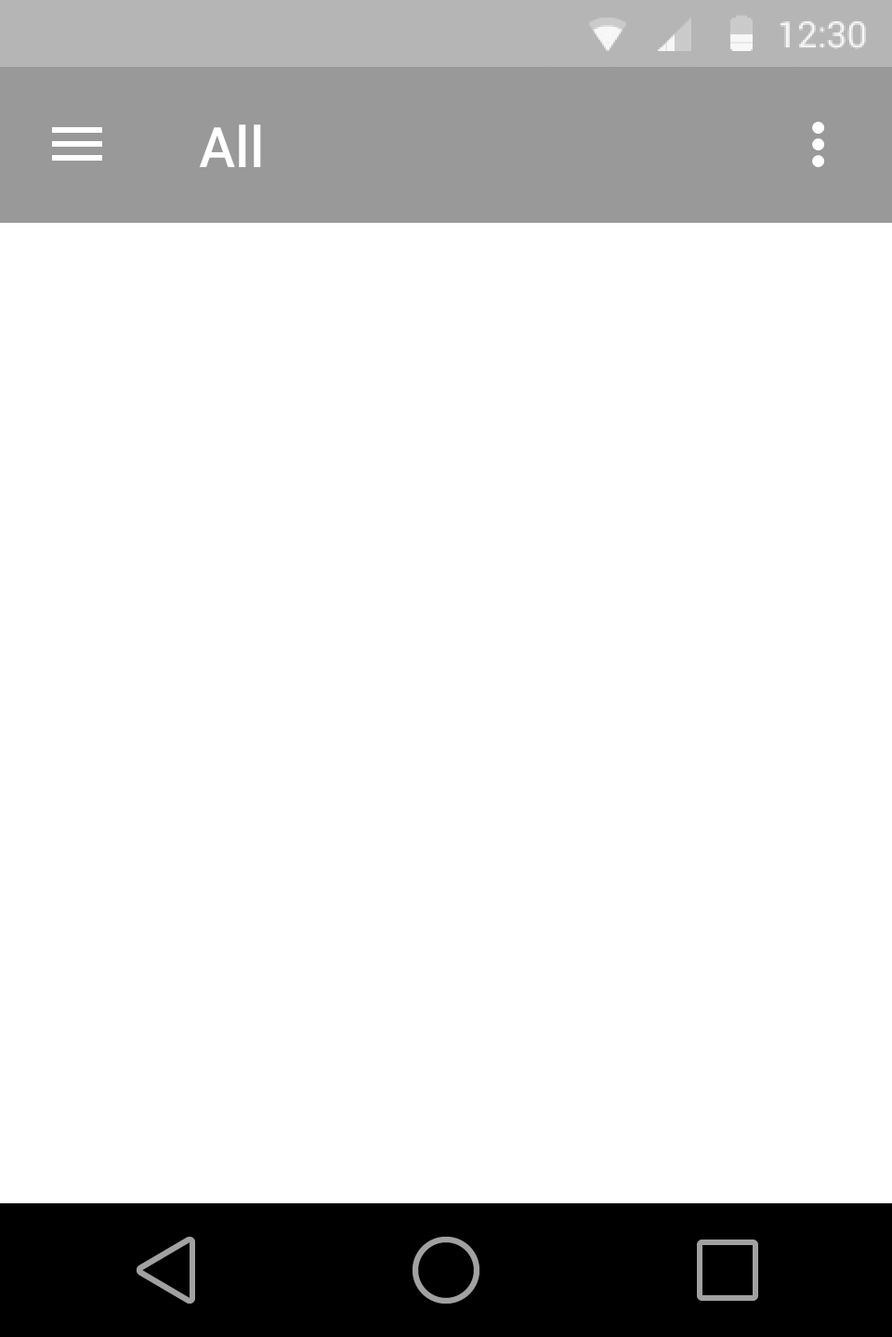
<style>
.page{position:relative;width:892px;height:1337px;background:#ffffff}
.page>*{position:absolute;margin:0}
.t1{font:55.7px "Roboto-Medium";color:#ffffff}
</style>
<div class="page">
<p class="t1" style="left:199px;top:124px;width:62px;height:43px">All</p>
</div>
